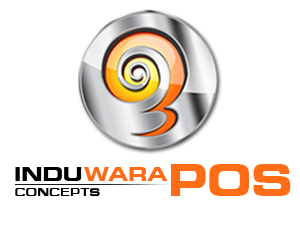
<style>
.page{position:relative;width:300px;height:227px;background:#ffffff}
.page>*{position:absolute;margin:0}
.t1{font:18.7px "Square721BT-BoldExtended";color:#000000}
.t2{font:18.8px "Square721BT-BoldExtended";color:#ff6c16}
.t3{font:43.6px "Square721BT-BoldExtended";color:#ff6c16;scale:0.93 1}
.t4{font:10.5px "Square721BT-BoldExtended";color:#000000}
</style>
<div class="page">
<p class="t1" style="left:15px;top:167px;width:67px;height:14px">INDU</p>
<p class="t2" style="left:84px;top:167px;width:84px;height:14px">WARA</p>
<p class="t3" style="left:171px;top:164px;width:120px;height:32px">POS</p>
<p class="t4" style="left:15px;top:188px;width:85px;height:9px">CONCEPTS</p>
</div>
